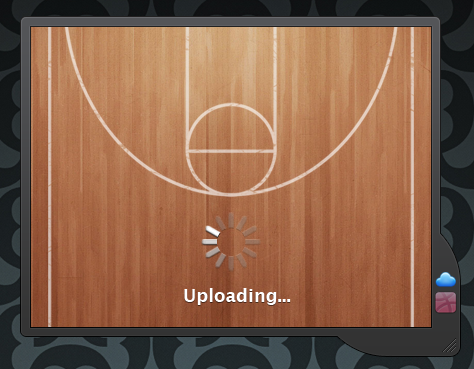
<style>
.page{position:relative;width:474px;height:369px}
.page>*{position:absolute;margin:0}
.t1{font:18px "LucidaGrande-Bold";color:#ffffff}
</style>
<div class="page">
<p class="t1" style="left:184px;top:288px;width:107px;height:17px">Uploading...</p>
</div>
